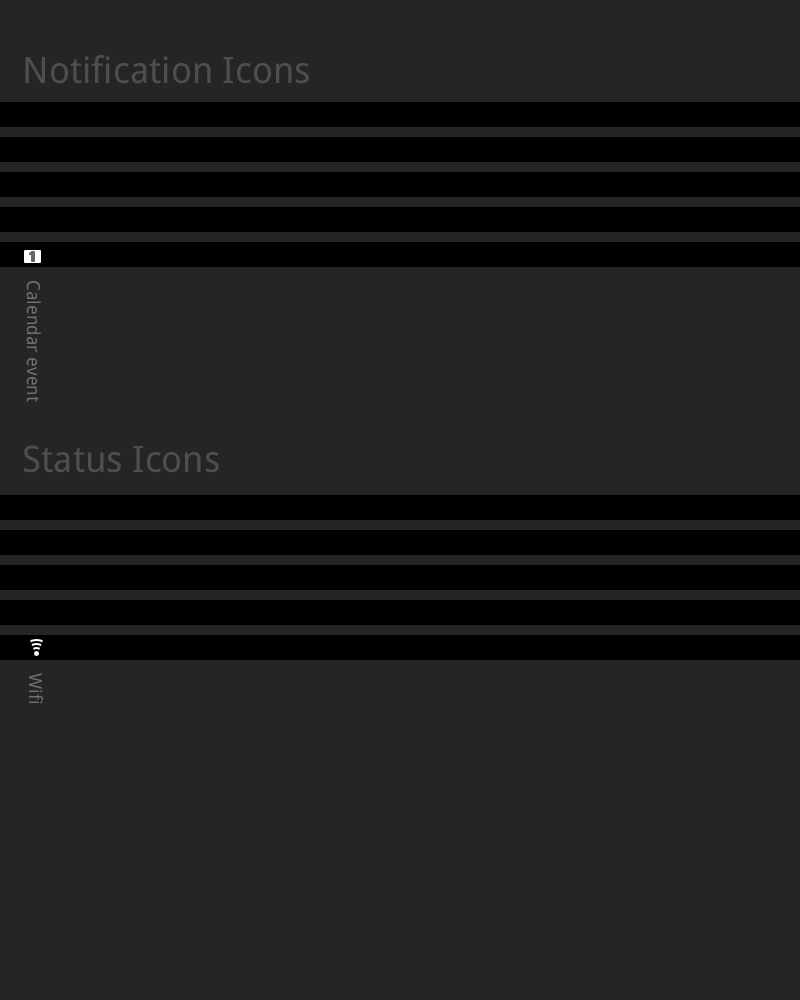
<style>
.page{position:relative;width:800px;height:1000px;background:#252525}
.page>*{position:absolute;margin:0}
.t1{font:36.4px "DroidSans";color:#4e4e4e}
.t2{font:18px "DroidSans";color:#707070}
</style>
<div class="page">
<p class="t1" style="left:25px;top:55px;width:284px;height:29px">Notification Icons</p>
<p class="t2" style="left:26px;top:281px;width:15px;height:121px;rotate:90deg">Calendar event</p>
<p class="t1" style="left:24px;top:445px;width:195px;height:28px">Status Icons</p>
<p class="t2" style="left:29px;top:673px;width:14px;height:31px;rotate:90deg">Wifi</p>
</div>
